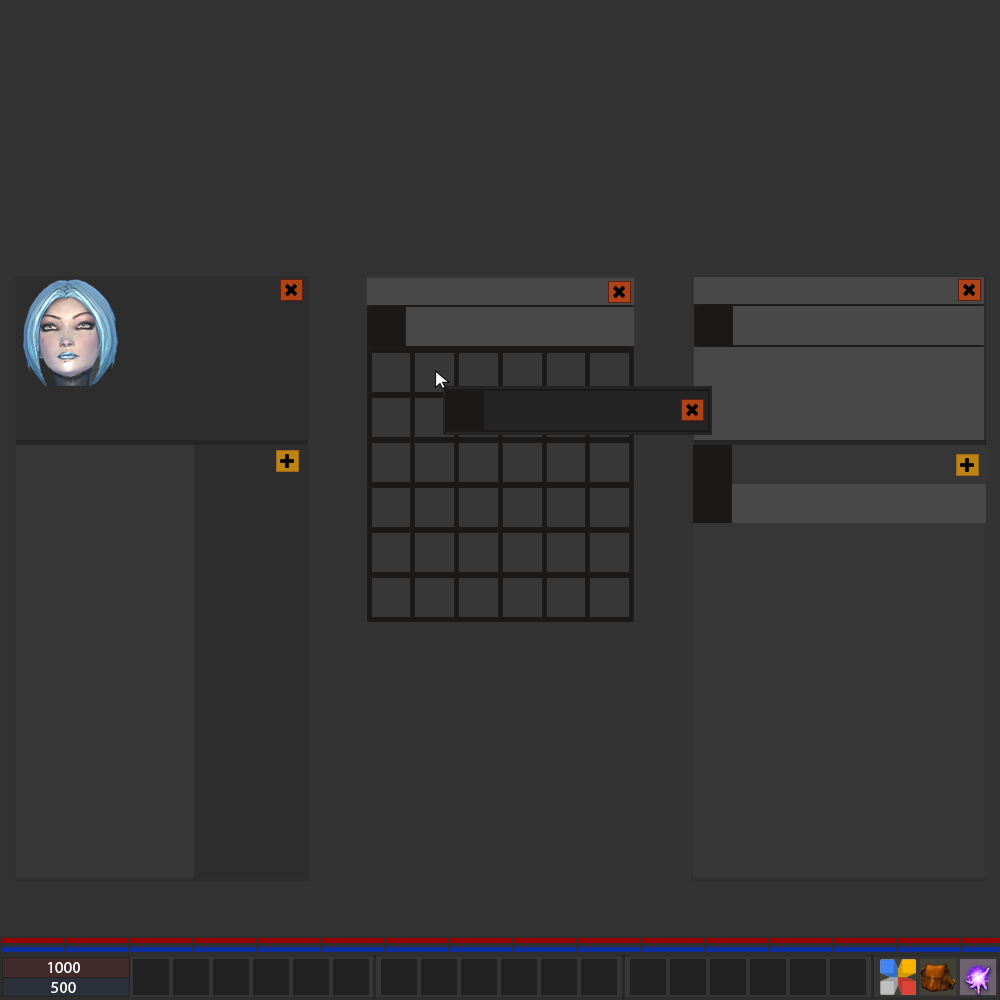
<style>
.page{position:relative;width:1000px;height:1000px;background:#333333}
.page>*{position:absolute;margin:0}
.t1{font:16.7px "MyriadPro-Regular";color:#ffffff}
</style>
<div class="page">
<p class="t1" style="left:48px;top:962px;width:32px;height:11px">1000</p>
<p class="t1" style="left:51px;top:982px;width:25px;height:11px">500</p>
</div>
